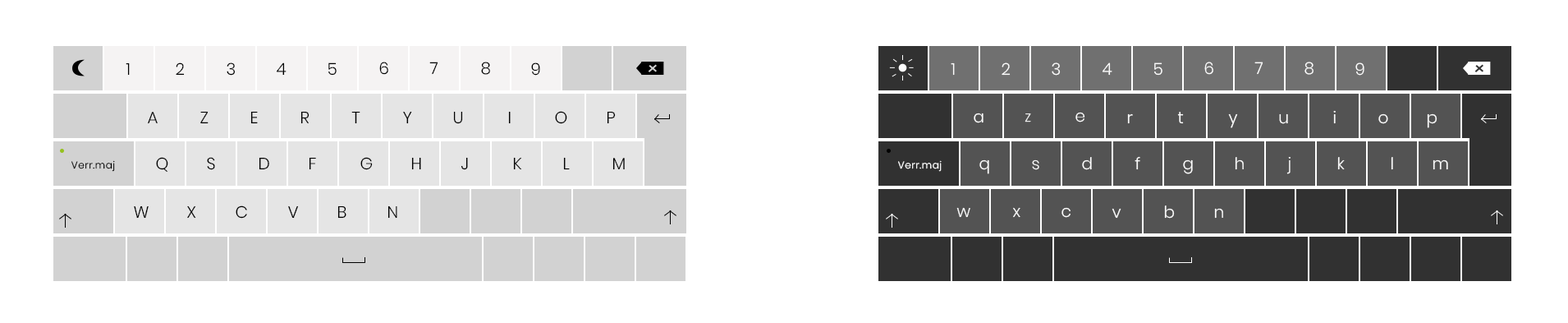
<style>
.page{position:relative;width:1568px;height:323px;background:#ffffff}
.page>*{position:absolute;margin:0}
.t1{font:16.4px "Poppins-Light";letter-spacing:0.05em;color:#000000}
.t2{font:16.4px "Poppins-Light";letter-spacing:0.05em;color:#fcfcfc;font-variant:small-caps}
.t3{font:16.4px "Poppins-Light";letter-spacing:0.05em;color:#fcfcfc}
.t4{font:9.9px "Poppins-Light";letter-spacing:0.05em;color:#000000}
.t5{font:9.9px "Poppins-Light";letter-spacing:0.05em;color:#fefefe}
</style>
<div class="page">
<p class="t1" style="left:126px;top:62px;width:4px;height:14px">1</p>
<p class="t1" style="left:176px;top:62px;width:9px;height:14px">2</p>
<p class="t1" style="left:227px;top:62px;width:9px;height:14px">3</p>
<p class="t1" style="left:277px;top:62px;width:10px;height:14px">4</p>
<p class="t1" style="left:328px;top:62px;width:9px;height:14px">5</p>
<p class="t1" style="left:379px;top:62px;width:9px;height:13px">6</p>
<p class="t1" style="left:429px;top:62px;width:9px;height:13px">7</p>
<p class="t1" style="left:481px;top:62px;width:9px;height:13px">8</p>
<p class="t1" style="left:531px;top:62px;width:9px;height:14px">9</p>
<p class="t2" style="left:951px;top:62px;width:4px;height:14px">1</p>
<p class="t2" style="left:1002px;top:62px;width:9px;height:14px">2</p>
<p class="t2" style="left:1052px;top:62px;width:9px;height:14px">3</p>
<p class="t2" style="left:1103px;top:62px;width:9px;height:14px">4</p>
<p class="t2" style="left:1154px;top:62px;width:8px;height:14px">5</p>
<p class="t2" style="left:1204px;top:62px;width:9px;height:13px">6</p>
<p class="t2" style="left:1254px;top:62px;width:9px;height:13px">7</p>
<p class="t2" style="left:1304px;top:62px;width:10px;height:13px">8</p>
<p class="t2" style="left:1355px;top:62px;width:9px;height:14px">9</p>
<p class="t1" style="left:148px;top:112px;width:10px;height:12px">A</p>
<p class="t1" style="left:200px;top:111px;width:9px;height:13px">Z</p>
<p class="t1" style="left:250px;top:111px;width:8px;height:13px">E</p>
<p class="t1" style="left:300px;top:111px;width:9px;height:13px">R</p>
<p class="t1" style="left:351px;top:111px;width:9px;height:13px">T</p>
<p class="t1" style="left:403px;top:111px;width:9px;height:13px">Y</p>
<p class="t1" style="left:453px;top:111px;width:10px;height:13px">U</p>
<p class="t1" style="left:508px;top:111px;width:3px;height:13px">I</p>
<p class="t1" style="left:555px;top:111px;width:12px;height:13px">O</p>
<p class="t1" style="left:607px;top:111px;width:9px;height:13px">P</p>
<p class="t3" style="left:974px;top:112px;width:9px;height:11px">a</p>
<p class="t2" style="left:1025px;top:113px;width:6px;height:9px">z</p>
<p class="t3" style="left:1075px;top:112px;width:10px;height:10px">e</p>
<p class="t3" style="left:1127px;top:113px;width:6px;height:11px">r</p>
<p class="t3" style="left:1177px;top:112px;width:7px;height:12px">t</p>
<p class="t3" style="left:1228px;top:113px;width:10px;height:15px">y</p>
<p class="t3" style="left:1279px;top:113px;width:9px;height:11px">u</p>
<p class="t3" style="left:1333px;top:110px;width:3px;height:14px">i</p>
<p class="t3" style="left:1378px;top:113px;width:10px;height:11px">o</p>
<p class="t3" style="left:1427px;top:113px;width:10px;height:15px">p</p>
<p class="t4" style="left:71px;top:160px;width:44px;height:12px">Verr.maj</p>
<p class="t1" style="left:156px;top:157px;width:12px;height:15px">Q</p>
<p class="t1" style="left:207px;top:157px;width:8px;height:13px">S</p>
<p class="t1" style="left:259px;top:157px;width:10px;height:13px">D</p>
<p class="t1" style="left:309px;top:157px;width:7px;height:13px">F</p>
<p class="t1" style="left:360px;top:157px;width:13px;height:13px">G</p>
<p class="t1" style="left:411px;top:157px;width:10px;height:13px">H</p>
<p class="t1" style="left:461px;top:157px;width:7px;height:13px">J</p>
<p class="t1" style="left:513px;top:157px;width:9px;height:13px">K</p>
<p class="t1" style="left:563px;top:157px;width:7px;height:13px">L</p>
<p class="t1" style="left:612px;top:158px;width:13px;height:12px">M</p>
<p class="t5" style="left:898px;top:160px;width:44px;height:12px">Verr.maj</p>
<p class="t3" style="left:979px;top:159px;width:10px;height:15px">q</p>
<p class="t3" style="left:1032px;top:159px;width:7px;height:11px">s</p>
<p class="t3" style="left:1082px;top:157px;width:10px;height:13px">d</p>
<p class="t3" style="left:1135px;top:156px;width:5px;height:14px">f</p>
<p class="t3" style="left:1183px;top:159px;width:10px;height:15px">g</p>
<p class="t3" style="left:1235px;top:157px;width:9px;height:13px">h</p>
<p class="t3" style="left:1286px;top:157px;width:5px;height:17px">j</p>
<p class="t3" style="left:1337px;top:157px;width:8px;height:13px">k</p>
<p class="t3" style="left:1391px;top:157px;width:2px;height:13px">l</p>
<p class="t3" style="left:1433px;top:159px;width:15px;height:11px">m</p>
<p class="t1" style="left:134px;top:205px;width:15px;height:13px">W</p>
<p class="t1" style="left:187px;top:205px;width:9px;height:13px">X</p>
<p class="t1" style="left:236px;top:205px;width:11px;height:13px">C</p>
<p class="t1" style="left:288px;top:205px;width:10px;height:13px">V</p>
<p class="t1" style="left:337px;top:205px;width:9px;height:13px">B</p>
<p class="t1" style="left:387px;top:205px;width:10px;height:13px">N</p>
<p class="t3" style="left:956px;top:207px;width:14px;height:11px">w</p>
<p class="t3" style="left:1013px;top:207px;width:7px;height:11px">x</p>
<p class="t3" style="left:1061px;top:207px;width:10px;height:11px">c</p>
<p class="t3" style="left:1112px;top:208px;width:9px;height:10px">v</p>
<p class="t3" style="left:1164px;top:205px;width:11px;height:13px">b</p>
<p class="t3" style="left:1214px;top:208px;width:9px;height:10px">n</p>
</div>
